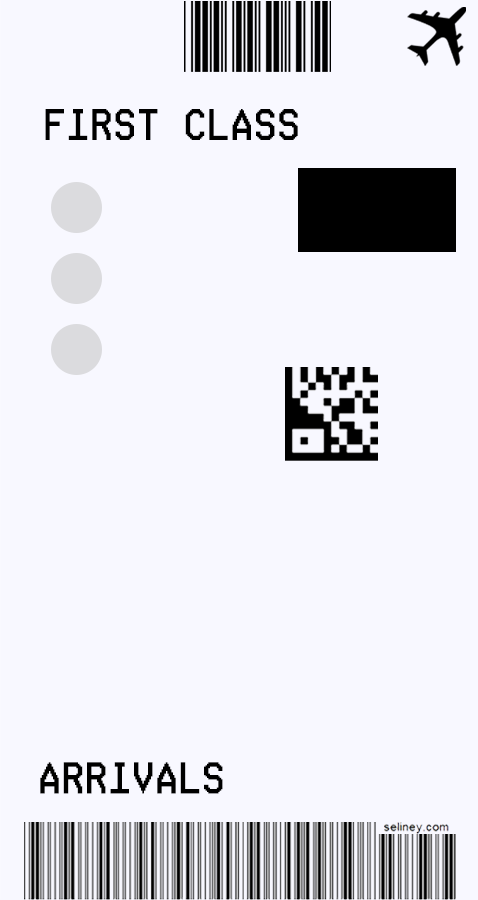
<style>
.page{position:relative;width:478px;height:900px;background:#f8f8ff}
.page>*{position:absolute;margin:0}
.t1{font:46.8px "Ticketing";letter-spacing:0.05em;color:#000000}
</style>
<div class="page">
<p class="t1" style="left:45px;top:109px;width:253px;height:31px">FIRST CLASS</p>
<p class="t1" style="left:40px;top:762px;width:183px;height:32px">ARRIVALS</p>
</div>
